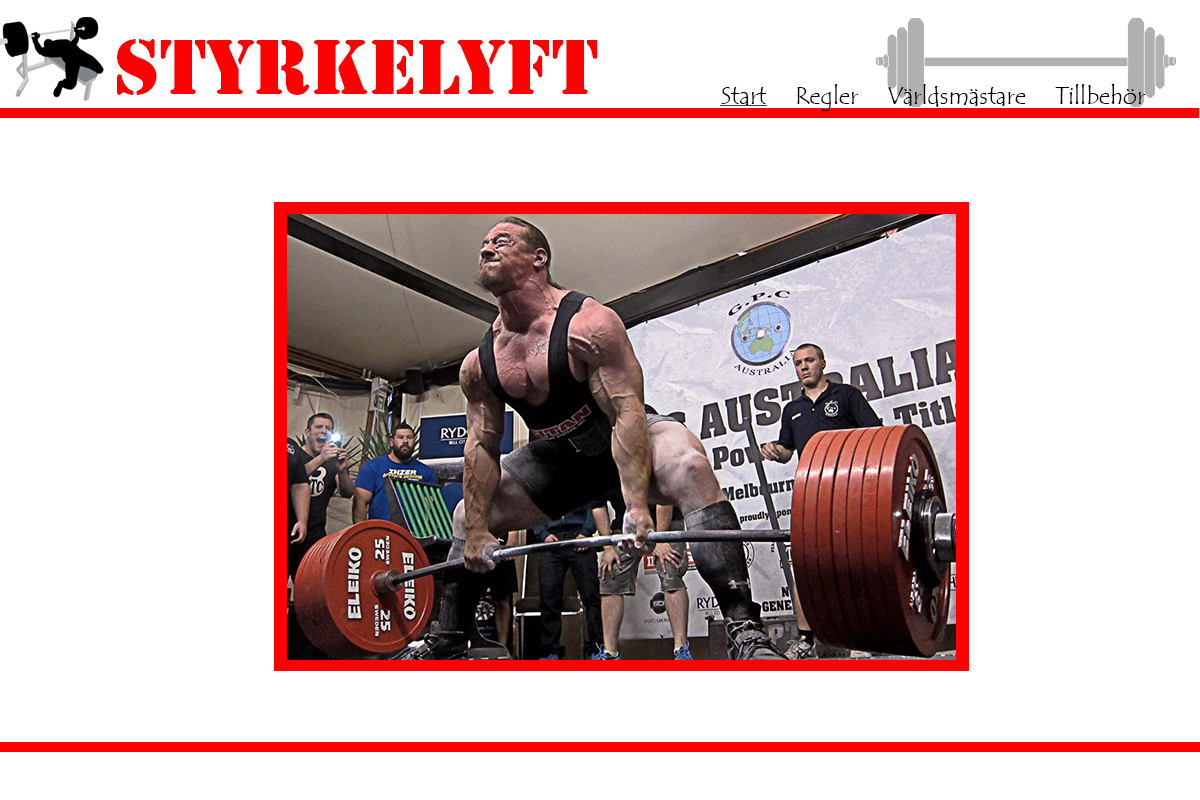
<style>
.page{position:relative;width:1200px;height:800px;background:#ffffff}
.page>*{position:absolute;margin:0}
.t1{font:72px "StencilStd";color:#fe0000}
.t2{font:24px "TempusSansITC";color:#000000}
</style>
<div class="page">
<p class="t1" style="left:117px;top:39px;width:481px;height:56px">Styrkelyft</p>
<p class="t2" style="left:721px;top:87px;width:46px;height:19px">Start</p>
<p class="t2" style="left:797px;top:84px;width:62px;height:27px">Regler</p>
<p class="t2" style="left:888px;top:84px;width:138px;height:23px">Världsmästare</p>
<p class="t2" style="left:1055px;top:83px;width:91px;height:21px">Tillbehör</p>
</div>
